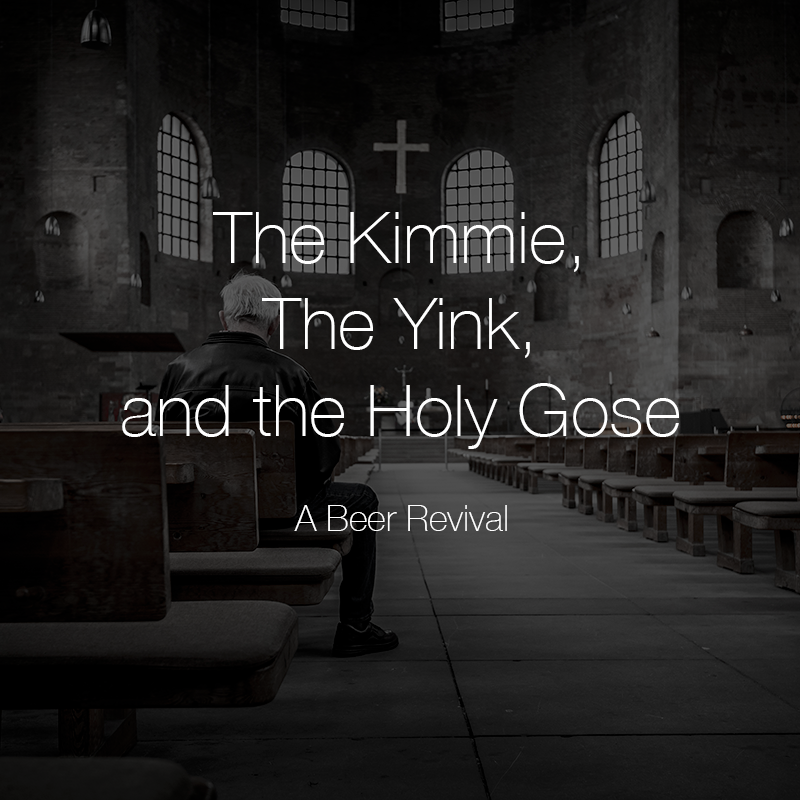
<style>
.page{position:relative;width:800px;height:800px}
.page>*{position:absolute;margin:0}
.t1{font:72px "HelveticaNeue-Thin";color:#ffffff}
.t2{font:36px "HelveticaNeue-Thin";color:#ffffff}
</style>
<div class="page">
<p class="t1" style="left:122px;top:212px;width:557px;height:237px;text-align:center">The Kimmie,<br>The Yink,<br>and the Holy Gose</p>
<p class="t2" style="left:294px;top:505px;width:213px;height:26px">A Beer Revival</p>
</div>
